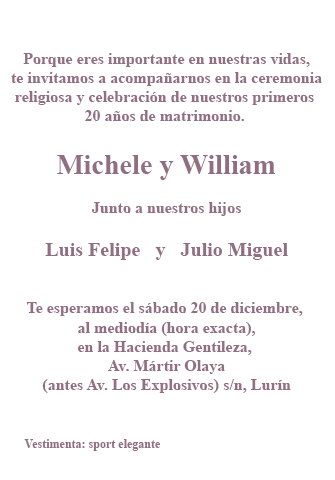
<style>
.page{position:relative;width:335px;height:480px;background:#ffffff}
.page>*{position:absolute;margin:0}
.t1{font:16px "TimesNewRomanPS-BoldMT";color:#916e82}
.t2{font:28px "TimesNewRomanPS-BoldMT";color:#916e82}
.t3{font:20px "TimesNewRomanPS-BoldMT";color:#916e82}
.t4{font:12px "TimesNewRomanPS-BoldMT";color:#916e82}
</style>
<div class="page">
<p class="t1" style="left:11px;top:53px;width:311px;height:398px;text-align:center">Porque eres importante en nuestras vidas,<br>te invitamos a acompañarnos en la ceremonia<br>religiosa y celebración de nuestros primeros <br>20 años de matrimonio. <br><br><span class="t2">Michele y William</span><br><br>Junto a nuestros hijos<br><br><span class="t3">Luis Felipe   y   Julio Miguel<br></span><br><br>Te esperamos el sábado 20 de diciembre, <br>al mediodía (hora exacta),<br>en la Hacienda Gentileza, <br>Av. Mártir Olaya<br>(antes Av. Los Explosivos) s/n, Lurín<br><br><br><span class="t4">Vestimenta: sport elegante</span></p>
</div>
